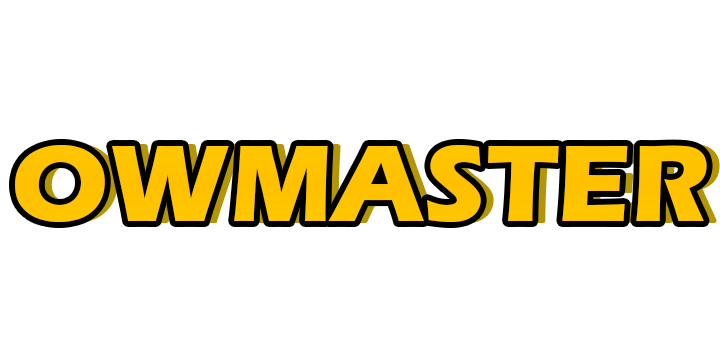
<style>
.page{position:relative;width:720px;height:360px;background:#ffffff}
.page>*{position:absolute;margin:0}
.t1{font:112px "ErasITC-Bold";color:#ffd200}
</style>
<div class="page">
<p class="t1" style="left:15px;top:145px;width:692px;height:77px">OWMASTER</p>
</div>
